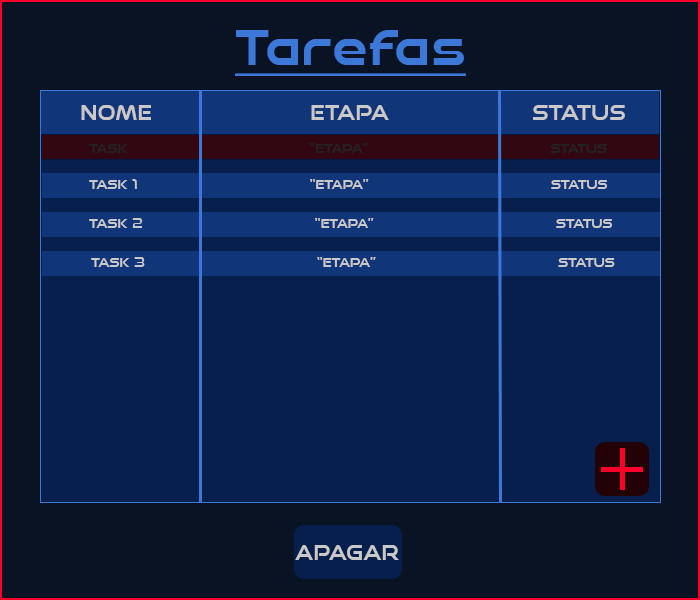
<style>
.page{position:relative;width:700px;height:600px;background:#061f4d}
.page>*{position:absolute;margin:0}
.t1{font:50px "Speedy-Regular";color:#3c78d8;text-decoration:underline}
.t2{font:20.8px "Speedy-Regular";color:#cac8c8;text-transform:uppercase}
.t3{font:12.5px "Speedy-Regular";color:#232222;text-transform:uppercase}
.t4{font:12.5px "Speedy-Regular";color:#cac8c8;text-transform:uppercase}
</style>
<div class="page">
<p class="t1" style="left:235px;top:30px;width:231px;height:46px">Tarefas</p>
<p class="t2" style="left:81px;top:105px;width:70px;height:15px">NOME</p>
<p class="t2" style="left:311px;top:105px;width:78px;height:15px">ETAPA</p>
<p class="t2" style="left:533px;top:105px;width:92px;height:15px">STATUS</p>
<p class="t3" style="left:89px;top:143px;width:518px;height:10px">task                                    “etapa”                                    status</p>
<p class="t4" style="left:89px;top:179px;width:518px;height:10px">task 1                                  “etapa”                                    status</p>
<p class="t4" style="left:89px;top:218px;width:523px;height:10px">task 2                                  “etapa”                                    status</p>
<p class="t4" style="left:91px;top:257px;width:524px;height:10px">task 3                                  “etapa”                                    status</p>
<p class="t2" style="left:295px;top:545px;width:104px;height:15px">apagar</p>
</div>
